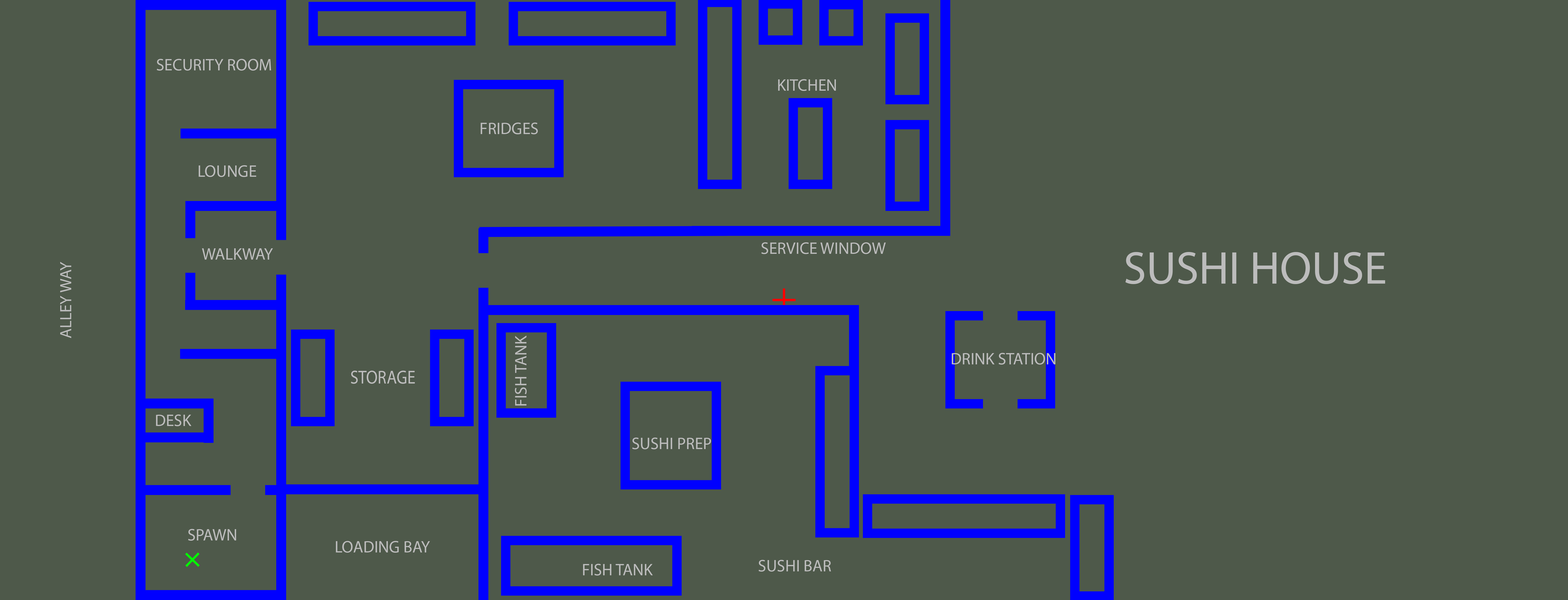
<style>
.page{position:relative;width:1568px;height:600px;background:#4e594a}
.page>*{position:absolute;margin:0}
.t1{font:16.6px "MyriadPro-Regular";color:#bcbcbc}
.t2{font:46.1px "MyriadPro-Regular";color:#bcbcbc}
.t3{font:16.5px "MyriadPro-Regular";color:#bcbcbc}
.t4{font:18.9px "MyriadPro-Regular";color:#bcbcbc;scale:0.88 1}
</style>
<div class="page">
<p class="t1" style="left:157px;top:59px;width:114px;height:12px">SECURITY ROOM</p>
<p class="t1" style="left:778px;top:79px;width:58px;height:12px">KITCHEN</p>
<p class="t1" style="left:481px;top:122px;width:57px;height:12px">FRIDGES</p>
<p class="t1" style="left:199px;top:165px;width:57px;height:12px">LOUNGE</p>
<p class="t1" style="left:761px;top:242px;width:125px;height:12px">SERVICE WINDOW</p>
<p class="t1" style="left:202px;top:248px;width:71px;height:11px">WALKWAY</p>
<p class="t2" style="left:1125px;top:252px;width:260px;height:32px">SUSHI HOUSE</p>
<p class="t3" style="left:60px;top:261px;width:11px;height:77px;rotate:-90deg">ALLEY WAY</p>
<p class="t1" style="left:515px;top:335px;width:12px;height:70px;rotate:-90deg">FISH TANK</p>
<p class="t1" style="left:952px;top:353px;width:103px;height:11px">DRINK STATION</p>
<p class="t4" style="left:351px;top:370px;width:64px;height:13px">STORAGE</p>
<p class="t1" style="left:156px;top:414px;width:35px;height:12px">DESK</p>
<p class="t1" style="left:632px;top:437px;width:79px;height:12px">SUSHI PREP</p>
<p class="t1" style="left:188px;top:529px;width:48px;height:11px">SPAWN</p>
<p class="t1" style="left:336px;top:540px;width:94px;height:12px">LOADING BAY</p>
<p class="t1" style="left:583px;top:563px;width:70px;height:12px">FISH TANK</p>
<p class="t1" style="left:759px;top:559px;width:72px;height:12px">SUSHI BAR</p>
</div>
